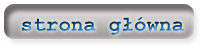
<style>
.page{position:relative;width:202px;height:48px}
.page>*{position:absolute;margin:0}
.t1{font:21px "CourierNewPS-BoldMT"}
.t2{font:36px "CourierNewPS-BoldMT"}
</style>
<div class="page">
<p class="t1" style="left:22px;top:17px;width:162px;height:18px"><span class="t2"><br></span>strona główna</p>
</div>
